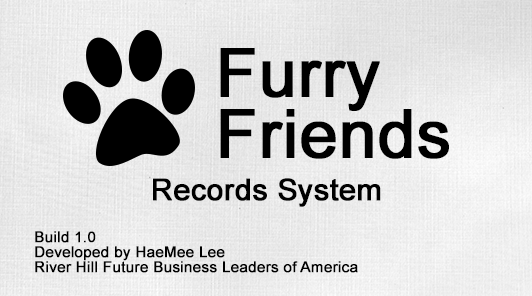
<style>
.page{position:relative;width:532px;height:296px}
.page>*{position:absolute;margin:0}
.t1{font:67px/61px "ArialMT";color:#000000;font-weight:bold}
.t2{font:30px "ArialMT";color:#000000;font-weight:bold}
.t3{font:15px/15px "ArialMT";color:#000000;font-weight:bold}
</style>
<div class="page">
<p class="t1" style="left:220px;top:48px;width:229px;height:111px">Furry <br>Friends</p>
<p class="t2" style="left:153px;top:178px;width:228px;height:29px">Records System</p>
<p class="t3" style="left:35px;top:231px;width:323px;height:42px">Build 1.0<br>Developed by HaeMee Lee<br>River Hill Future Business Leaders of America</p>
</div>
